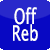
<style>
.page{position:relative;width:50px;height:50px;background:#0808c3}
.page>*{position:absolute;margin:0}
.t1{font:21px "LucidaSansUnicode";color:#fffffd;scale:0.7 1}
</style>
<div class="page">
<p class="t1" style="left:13px;top:7px;width:25px;height:34px;text-align:center">Off<br>Reb</p>
</div>
